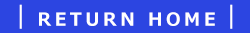
<style>
.page{position:relative;width:250px;height:33px;background:#2c45e1}
.page>*{position:absolute;margin:0}
.t1{font:18px "Meiryo-Bold";letter-spacing:0.2em;color:#ffffff}
.t2{font:24px "Meiryo-Bold";letter-spacing:0.2em;color:#ffffff}
</style>
<div class="page">
<p class="t1" style="left:19px;top:4px;width:214px;height:25px"><span class="t2">｜</span>RETURN HOME<span class="t2">｜</span></p>
</div>
